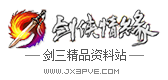
<style>
.page{position:relative;width:168px;height:80px;background:#ffffff}
.page>*{position:absolute;margin:0}
.t1{font:12px "SimSun";color:#555555}
.t2{font:8px "04b08";color:#888888}
</style>
<div class="page">
<p class="t1" style="left:43px;top:49px;width:83px;height:12px">剑三精品资料站</p>
<p class="t2" style="left:44px;top:69px;width:75px;height:5px">www.jx3pve.com</p>
</div>
